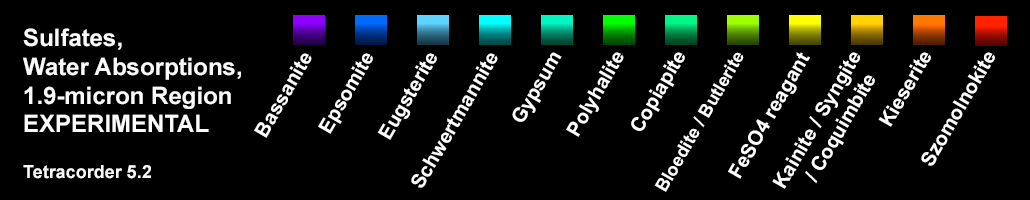
<style>
.page{position:relative;width:1030px;height:200px;background:#000000}
.page>*{position:absolute;margin:0}
.t1{font:24px "Arial-BoldMT";color:#f9faf9}
.t2{font:18px "Arial-BoldMT";color:#f9faf9}
.t3{font:20px "Arial-BoldMT";color:#ffffff}
.t4{font:18px "Arial-BoldMT";color:#ffffff}
</style>
<div class="page">
<p class="t1" style="left:23px;top:28px;width:218px;height:151px">Sulfates,<br>Water Absorptions,<br>1.9-micron Region<br>EXPERIMENTAL<br><br><br><span class="t2">Tetracorder 5.2</span></p>
<p class="t3" style="left:254px;top:53px;width:58px;height:85px;rotate:-60deg">Bassanite</p>
<p class="t3" style="left:318px;top:53px;width:55px;height:81px;rotate:-60deg">Epsomite</p>
<p class="t3" style="left:377px;top:53px;width:60px;height:87px;rotate:-60deg">Eugsterite</p>
<p class="t3" style="left:411px;top:53px;width:87px;height:135px;rotate:-60deg">Schwertmannite</p>
<p class="t3" style="left:512px;top:52px;width:50px;height:70px;rotate:-60deg">Gypsum</p>
<p class="t3" style="left:566px;top:52px;width:58px;height:85px;rotate:-60deg">Polyhalite</p>
<p class="t3" style="left:631px;top:52px;width:54px;height:79px;rotate:-60deg">Copiapite</p>
<p class="t4" style="left:654px;top:52px;width:90px;height:140px;rotate:-60deg">Bloedite / Butlerite</p>
<p class="t3" style="left:728px;top:52px;width:82px;height:127px;rotate:-60deg">FeSO4 reagant</p>
<p class="t3" style="left:772px;top:52px;width:103px;height:137px;rotate:-60deg">Kainite / Syngite<br>    / Coquimbite</p>
<p class="t3" style="left:878px;top:52px;width:53px;height:75px;rotate:-60deg">Kieserite</p>
<p class="t3" style="left:921px;top:52px;width:74px;height:114px;rotate:-60deg">Szomolnokite</p>
</div>
